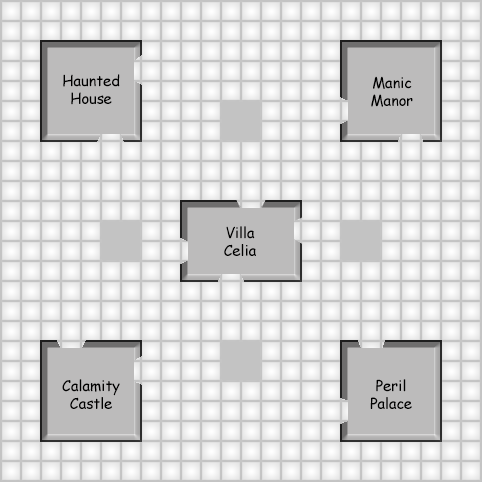
<style>
.page{position:relative;width:482px;height:482px}
.page>*{position:absolute;margin:0}
.t1{font:14.6px "ComicSansMS";color:#000000}
</style>
<div class="page">
<p class="t1" style="left:63px;top:74px;width:57px;height:31px;text-align:center">Haunted<br>House</p>
<p class="t1" style="left:371px;top:76px;width:42px;height:31px;text-align:center">Manic<br>Manor</p>
<p class="t1" style="left:224px;top:226px;width:32px;height:30px;text-align:center">Villa<br>Celia</p>
<p class="t1" style="left:62px;top:379px;width:58px;height:30px;text-align:center">Calamity<br>Castle</p>
<p class="t1" style="left:370px;top:379px;width:42px;height:30px;text-align:center">Peril<br>Palace</p>
</div>
